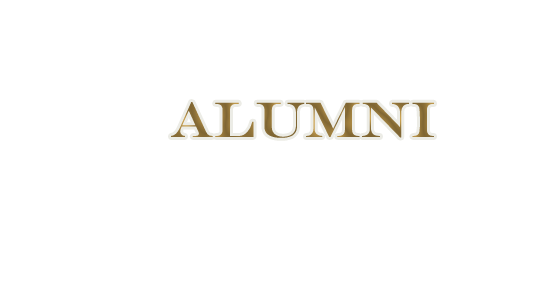
<style>
.page{position:relative;width:533px;height:297px;background:#ffffff}
.page>*{position:absolute;margin:0}
.t1{font:50px "EngraversMT";color:#896e37}
</style>
<div class="page">
<p class="t1" style="left:171px;top:102px;width:263px;height:36px">alumni</p>
</div>
